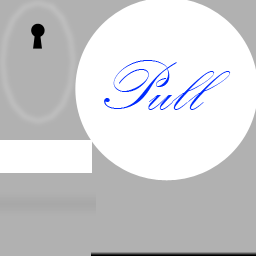
<style>
.page{position:relative;width:256px;height:256px;background:#b1b1b1}
.page>*{position:absolute;margin:0}
.t1{font:72px "KunstlerScript";color:#002aff}
</style>
<div class="page">
<p class="t1" style="left:104px;top:60px;width:127px;height:50px">Pull</p>
</div>
